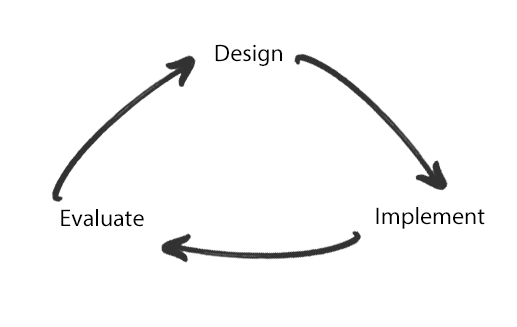
<style>
.page{position:relative;width:517px;height:327px;background:#ffffff}
.page>*{position:absolute;margin:0}
.t1{font:24px "MyriadPro-Regular";color:#000000}
</style>
<div class="page">
<p class="t1" style="left:215px;top:44px;width:67px;height:22px">Design</p>
<p class="t1" style="left:61px;top:209px;width:83px;height:18px">Evaluate</p>
<p class="t1" style="left:376px;top:207px;width:109px;height:22px">Implement</p>
</div>
